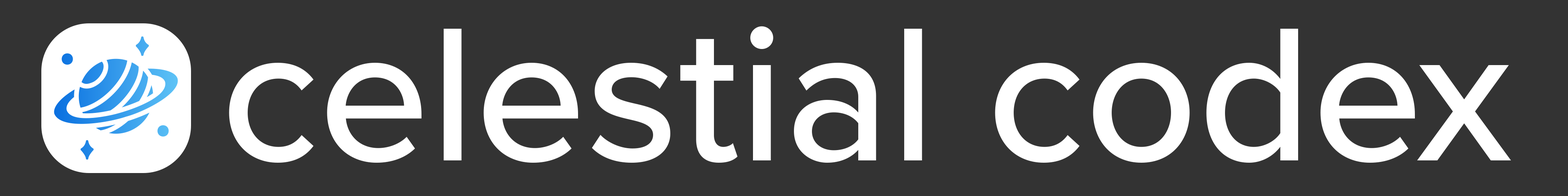
<style>
.page{position:relative;width:1568px;height:196px;background:#333333}
.page>*{position:absolute;margin:0}
.t1{font:197.5px "ProximaNova-Medium";color:#ffffff}
</style>
<div class="page">
<p class="t1" style="left:229px;top:26px;width:1282px;height:137px">celestial codex</p>
</div>
